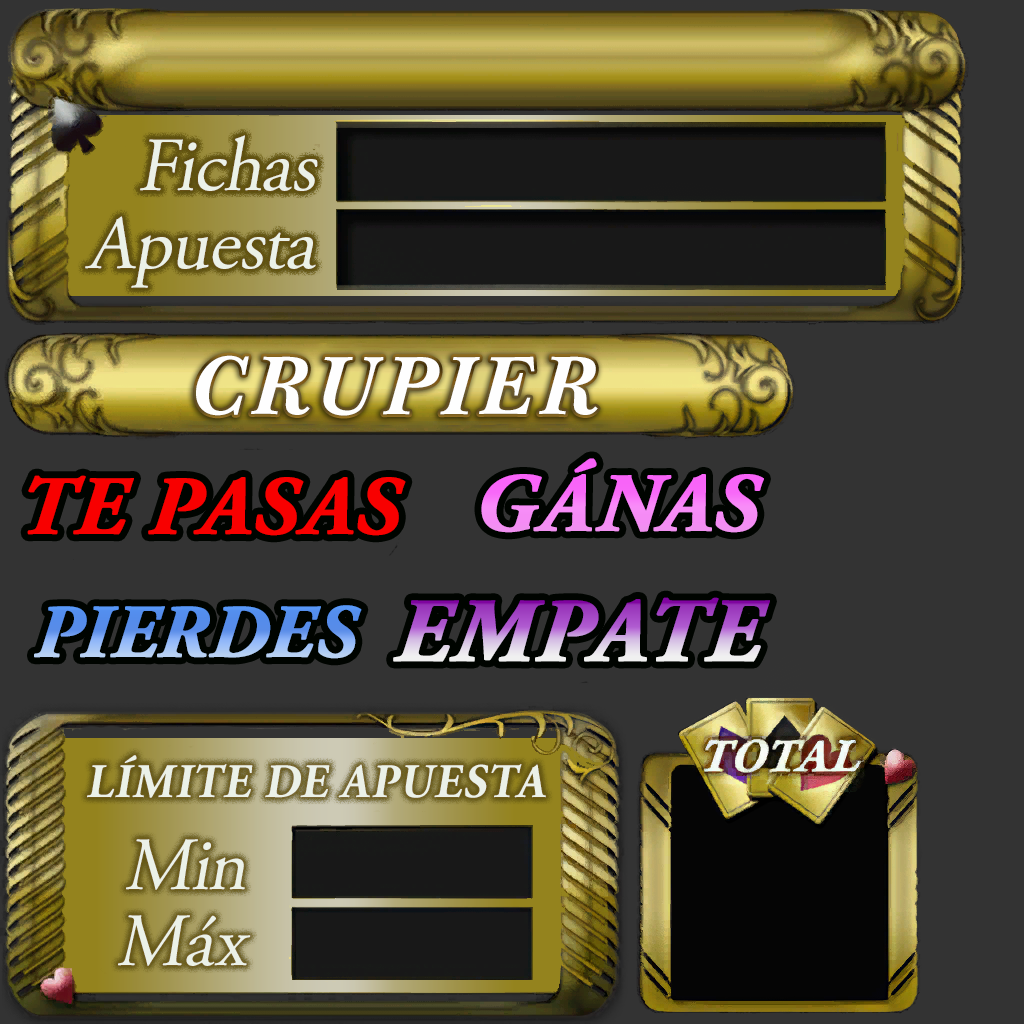
<style>
.page{position:relative;width:1024px;height:1024px;background:#333333}
.page>*{position:absolute;margin:0}
.t1{font:76px "AGaramondPro-Regular";color:#ebf1e8;font-style:italic}
.t2{font:85.1px "BaskervilleBT-BoldItalic";letter-spacing:0.08em;color:#fefefe}
.t3{font:83px "AGaramondPro-BoldItalic";font-weight:bold}
.t4{font:83px "AGaramondPro-BoldItalic";color:#f80000;font-weight:bold}
.t5{font:75px "AGaramondPro-BoldItalic";font-weight:bold}
.t6{font:90px "AGaramondPro-BoldItalic";font-weight:bold}
.t7{font:48px "AGaramondPro-Bold";letter-spacing:0.02em;color:#ebf1e8;text-transform:uppercase;font-style:italic;scale:0.94 1}
.t8{font:74.9px "AGaramondPro-Regular";color:#ebf1e8;font-style:italic}
</style>
<div class="page">
<p class="t1" style="left:140px;top:135px;width:178px;height:56px">Fichas</p>
<p class="t1" style="left:140px;top:135px;width:178px;height:56px">Fichas</p>
<p class="t1" style="left:140px;top:135px;width:178px;height:56px">Fichas</p>
<p class="t1" style="left:140px;top:135px;width:178px;height:56px">Fichas</p>
<p class="t1" style="left:85px;top:216px;width:231px;height:72px">Apuesta</p>
<p class="t1" style="left:85px;top:216px;width:231px;height:72px">Apuesta</p>
<p class="t1" style="left:85px;top:216px;width:231px;height:72px">Apuesta</p>
<p class="t2" style="left:196px;top:355px;width:402px;height:61px">CRUPIER</p>
<p class="t3" style="left:481px;top:458px;width:283px;height:75px">GÁNAS</p>
<p class="t4" style="left:27px;top:475px;width:379px;height:61px">TE PASAS</p>
<p class="t5" style="left:34px;top:605px;width:328px;height:54px">PIERDES</p>
<p class="t6" style="left:393px;top:597px;width:377px;height:65px">EMPATE</p>
<p class="t7" style="left:87px;top:755px;width:459px;height:43px">límite de apuesta</p>
<p class="t8" style="left:126px;top:839px;width:119px;height:51px">Min</p>
<p class="t8" style="left:118px;top:915px;width:133px;height:51px">Máx</p>
</div>
